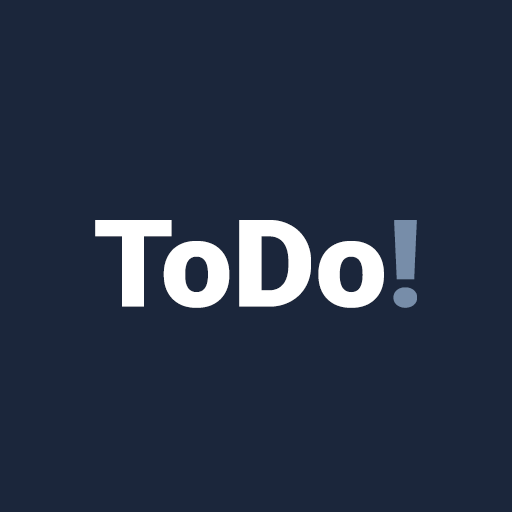
<style>
.page{position:relative;width:512px;height:512px;background:#1b263b}
.page>*{position:absolute;margin:0}
.t1{font:121.6px "Roboto-Black";color:#ffffff;scale:1.05 1}
.t2{font:121.6px "Roboto-Black";color:#778da9;scale:1.05 1}
</style>
<div class="page">
<p class="t1" style="left:95px;top:220px;width:322px;height:88px">ToDo<span class="t2">!</span></p>
</div>
